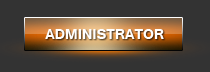
<style>
.page{position:relative;width:210px;height:72px;background:#333333}
.page>*{position:absolute;margin:0}
.t1{font:18px "Tunga-Bold";color:#ffffff}
</style>
<div class="page">
<p class="t1" style="left:45px;top:29px;width:119px;height:10px">ADMINISTRATOR</p>
</div>
